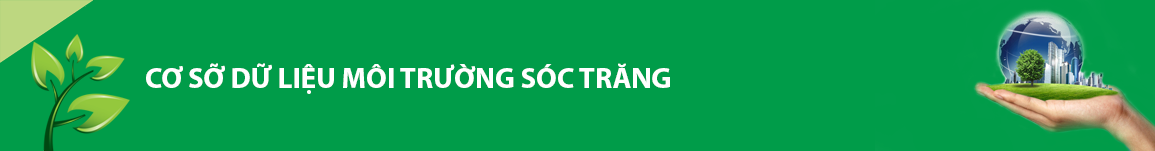
<style>
.page{position:relative;width:1155px;height:151px;background:#009c49}
.page>*{position:absolute;margin:0}
.t1{font:29px "MyriadPro-Bold";color:#ffffff}
</style>
<div class="page">
<p class="t1" style="left:146px;top:63px;width:524px;height:31px">CƠ SỠ DỮ LIỆU MÔI TRƯỜNG SÓC TRĂNG</p>
</div>
